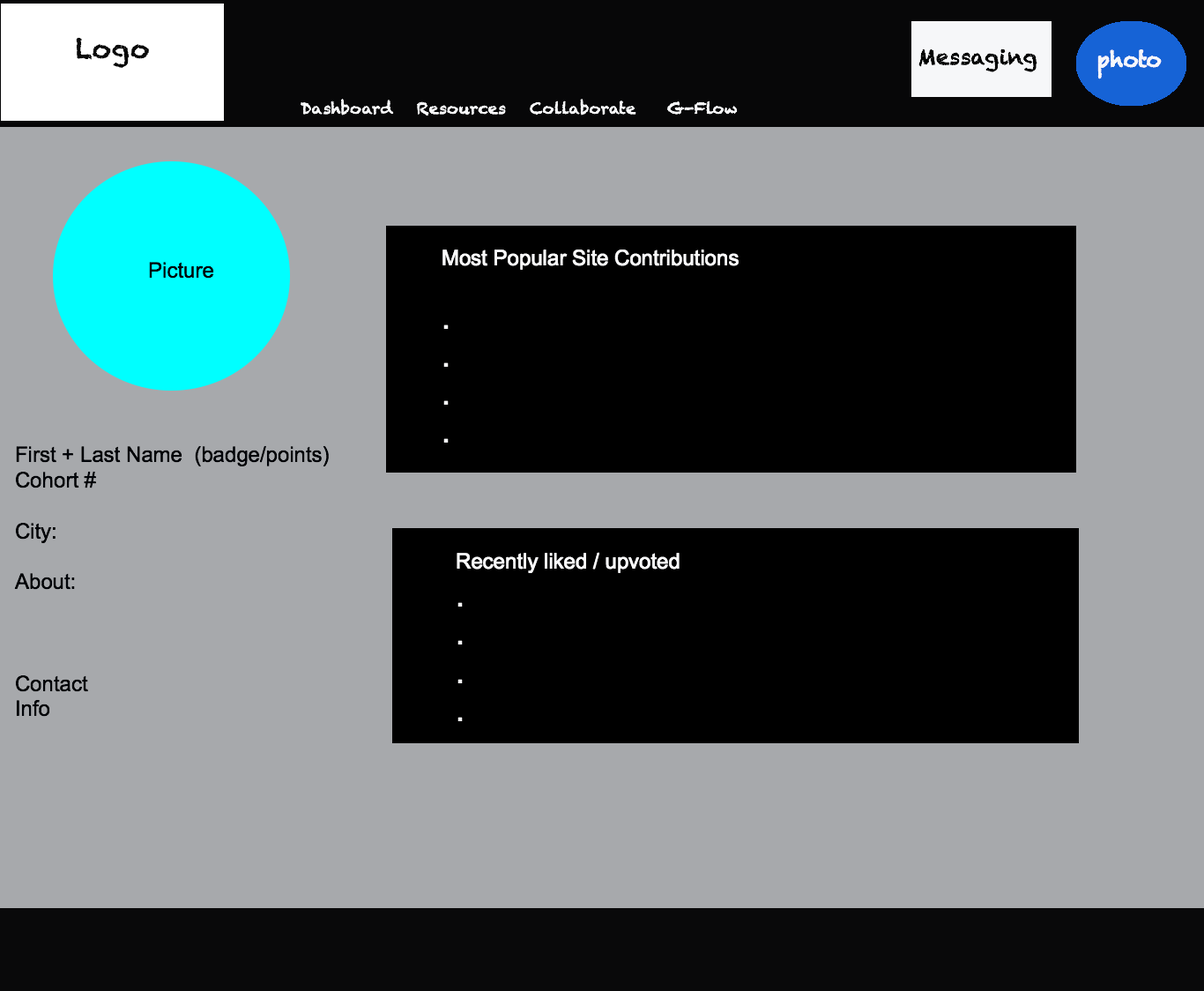
<style>
.page{position:relative;width:1204px;height:991px;background:#a7a9ac}
.page>*{position:absolute;margin:0}
.t1{font:21.2px "ArialMT";color:#fafafb}
.t2{font:31.7px "ArialMT";color:#fafafb}
.t3{font:21.2px "ArialMT";color:#010409}
</style>
<div class="page">
<p class="t1" style="left:442px;top:249px;width:297px;height:193px">Most Popular Site Contributions<br><br><span class="t2">.<br>.<br>.<br>.</span></p>
<p class="t3" style="left:149px;top:262px;width:65px;height:16px">Picture</p>
<p class="t3" style="left:14px;top:445px;width:315px;height:271px">First + Last Name  (badge/points)<br>Cohort #<br><br>City:<br><br>About:<br><br><br><br>Contact<br>Info</p>
<p class="t1" style="left:456px;top:552px;width:223px;height:169px">Recently liked / upvoted<br><span class="t2">  .<br>  .<br>  .<br>  .</span></p>
</div>
